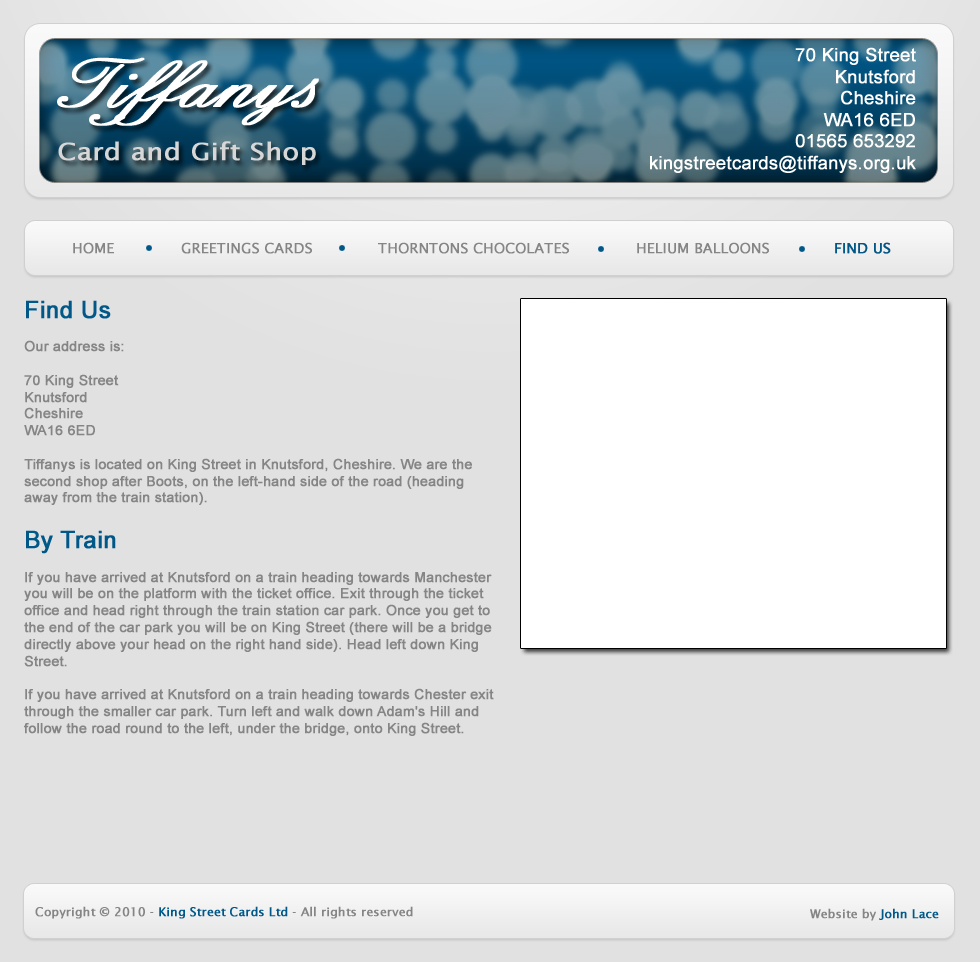
<style>
.page{position:relative;width:980px;height:962px;background:#e1e1e1}
.page>*{position:absolute;margin:0}
.t1{font:18px "ArialMT";color:#ffffff;font-weight:bold}
.t2{font:24px "LucidaSans";color:#d7d7d7;font-weight:bold;scale:1.12 1}
.t3{font:14px "LucidaSans";color:#858585;font-weight:bold}
.t4{font:14px "LucidaSans";color:#005889;font-weight:bold}
.t5{font:14px "ArialMT";color:#858585;font-weight:bold}
.t6{font:24px "ArialMT";color:#005889;font-weight:bold}
.t7{font:12px "LucidaSans";color:#005889;font-weight:bold}
.t8{font:12px "LucidaSans";color:#858585;font-weight:bold}
</style>
<div class="page">
<p class="t1" style="left:650px;top:47px;width:266px;height:126px;text-align:right">70 King Street<br>Knutsford<br>Cheshire<br>WA16 6ED<br>01565 653292<br>kingstreetcards@tiffanys.org.uk</p>
<p class="t2" style="left:58px;top:141px;width:258px;height:24px">Card and Gift Shop</p>
<p class="t3" style="left:73px;top:242px;width:41px;height:12px">HOME</p>
<p class="t3" style="left:181px;top:242px;width:131px;height:12px">GREETINGS CARDS</p>
<p class="t3" style="left:378px;top:242px;width:191px;height:12px">THORNTONS CHOCOLATES</p>
<p class="t3" style="left:637px;top:242px;width:132px;height:12px">HELIUM BALLOONS</p>
<p class="t4" style="left:835px;top:242px;width:56px;height:12px">FIND US</p>
<p class="t4" style="left:835px;top:242px;width:56px;height:12px">FIND US</p>
<p class="t5" style="left:24px;top:300px;width:470px;height:436px"><span class="t6">Find Us<br> <br></span>Our address is:<br> <br>70 King Street<br>Knutsford<br>Cheshire<br>WA16 6ED<br> <br>Tiffanys is located on King Street in Knutsford, Cheshire. We are the second shop after Boots, on the left-hand side of the road (heading away from the train station).<br> <br><span class="t6">By Train<br>  <br></span>If you have arrived at Knutsford on a train heading towards Manchester you will be on the platform with the ticket office. Exit through the ticket office and head right through the train station car park. Once you get to the end of the car park you will be on King Street (there will be a bridge directly above your head on the right hand side). Head left down King Street.<br> <br>If you have arrived at Knutsford on a train heading towards Chester exit through the smaller car park. Turn left and walk down Adam's Hill and follow the road round to the left, under the bridge, onto King Street.</p>
<p class="t7" style="left:35px;top:906px;width:378px;height:13px"><span class="t8">Copyright © 2010 - </span>King Street Cards Ltd<span class="t8"> - All rights reserved</span></p>
<p class="t8" style="left:810px;top:908px;width:129px;height:13px">Website by <span class="t7">John Lace</span></p>
</div>
